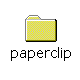
<style>
.page{position:relative;width:80px;height:80px;background:#ffffff}
.page>*{position:absolute;margin:0}
.t1{font:14px "MSReferenceSansSerif";color:#000000}
</style>
<div class="page">
<p class="t1" style="left:11px;top:47px;width:60px;height:14px">paperclip</p>
</div>
